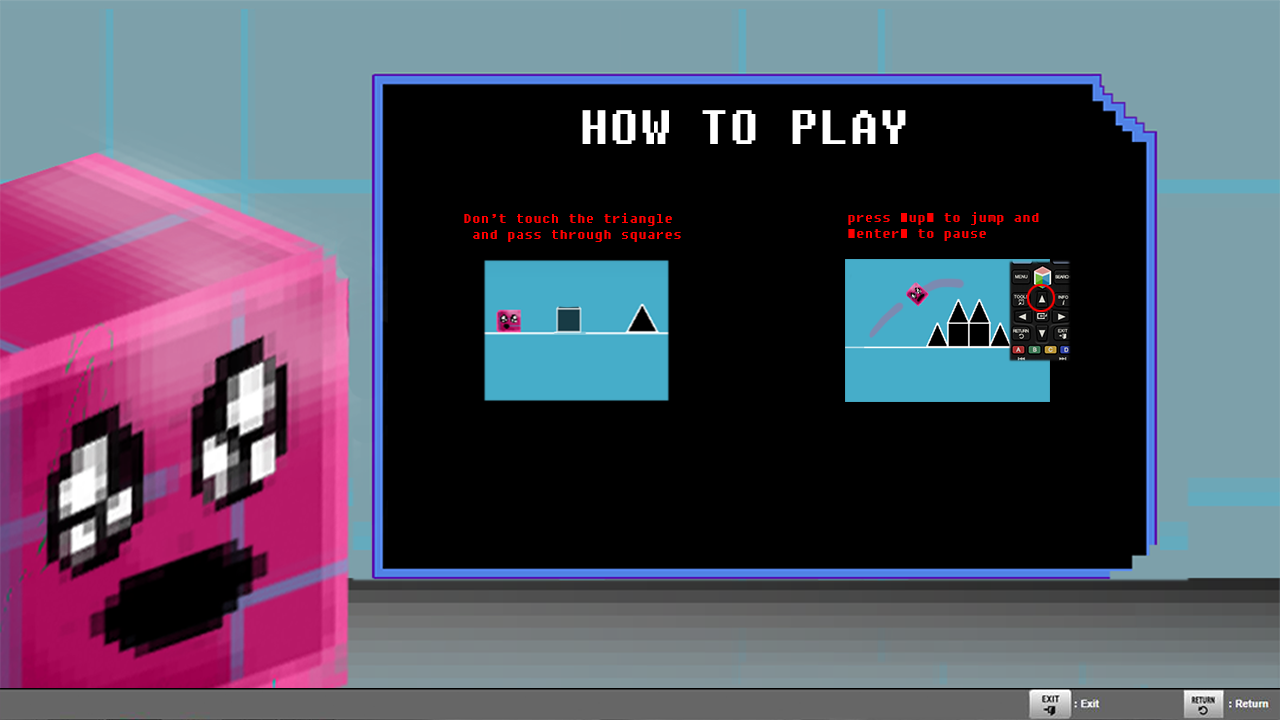
<style>
.page{position:relative;width:1280px;height:720px;background:#000000}
.page>*{position:absolute;margin:0}
.t1{font:48px "Fixedsys";color:#ffffff}
.t2{font:14px "Fixedsys";color:#ff0000}
</style>
<div class="page">
<p class="t1" style="left:582px;top:110px;width:324px;height:34px">HOW TO PLAY :</p>
<p class="t2" style="left:464px;top:213px;width:217px;height:29px">Don’t touch the triangle<br> and pass through squares</p>
<p class="t2" style="left:848px;top:212px;width:191px;height:29px">press “up” to jump and “enter” to pause</p>
</div>
